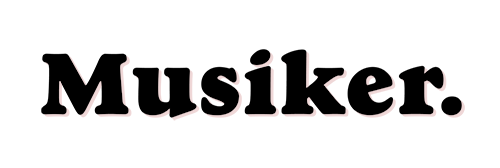
<style>
.page{position:relative;width:500px;height:168px;background:#ffffff}
.page>*{position:absolute;margin:0}
.t1{font:89.3px "GoudyHeavyfaceBT-Regular";color:#000000;font-weight:bold}
</style>
<div class="page">
<p class="t1" style="left:41px;top:49px;width:421px;height:69px">Musiker.</p>
<p class="t1" style="left:44px;top:51px;width:421px;height:70px">Musiker.</p>
</div>
